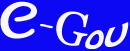
<style>
.page{position:relative;width:130px;height:51px;background:#0d08f4}
.page>*{position:absolute;margin:0}
.t1{font:115.6px "GiddyupStd";color:#fbf8f8}
.t2{font:58.6px "GiddyupStd";color:#fbf8f8}
.t3{font:56.5px "Georgia";color:#fbf8f8}
.t4{font:26.8px "HoboStd";color:#fbf8f8}
.t5{font:27.2px "HoboStd";color:#fbf8f8}
</style>
<div class="page">
<p class="t1" style="left:0px;top:1px;width:129px;height:48px">e<span class="t2">-</span><span class="t3">G</span><span class="t4">O</span><span class="t5">U</span></p>
</div>
